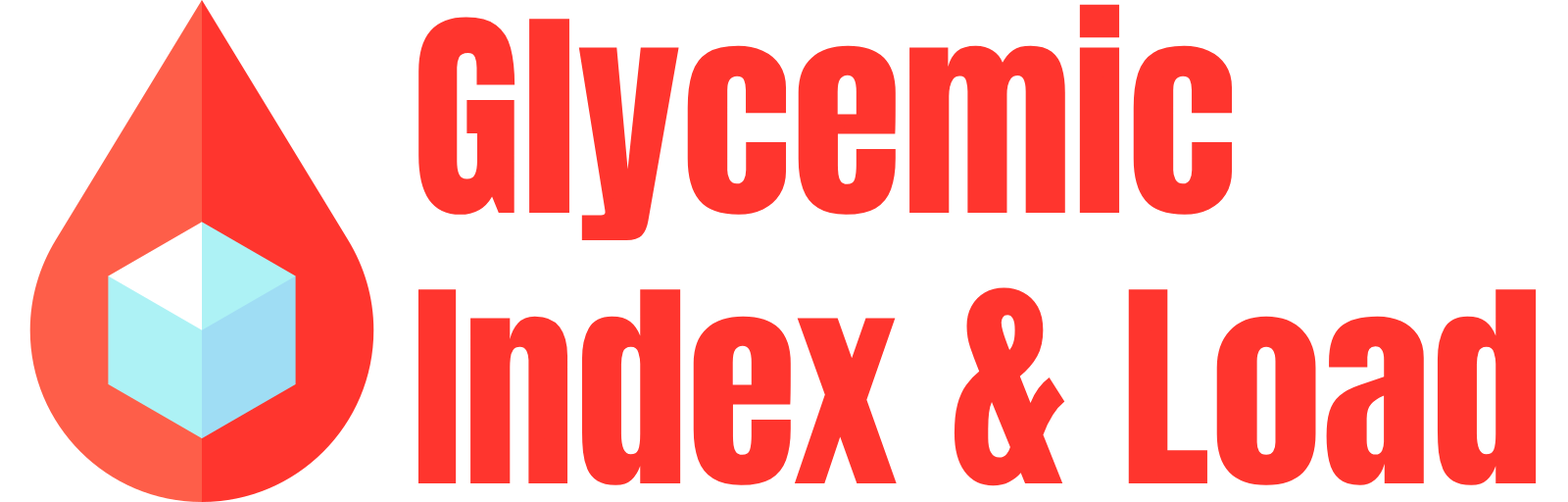
<style>
.page{position:relative;width:1568px;height:502px;background:#ffffff}
.page>*{position:absolute;margin:0}
.t1{font:225.4px "Anton-Regular";color:#ff352e}
</style>
<div class="page">
<p class="t1" style="left:417px;top:4px;width:1120px;height:482px">Glycemic<br>Index &amp; Load</p>
</div>
